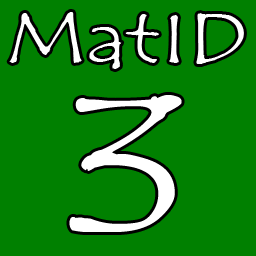
<style>
.page{position:relative;width:256px;height:256px;background:#008000}
.page>*{position:absolute;margin:0}
.t1{font:70.8px/170px "TempusSansITC";color:#ffffff;scale:1.31 1}
.t2{font:200px/170px "TempusSansITC";color:#ffffff;scale:1.31 1}
</style>
<div class="page">
<p class="t1" style="left:9px;top:12px;width:235px;height:220px;text-align:center">MatID<br><span class="t2">3</span></p>
</div>
